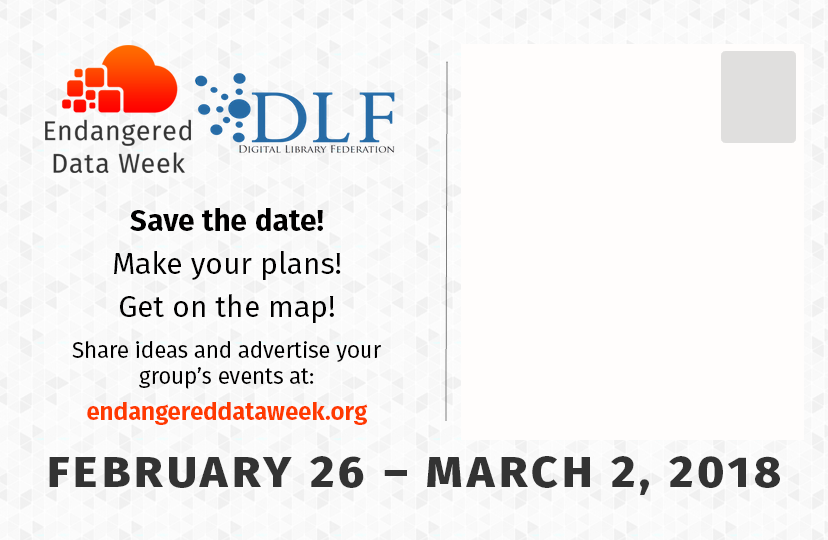
<style>
.page{position:relative;width:828px;height:540px;background:#fffdfc}
.page>*{position:absolute;margin:0}
.t1{font:22px "FiraSans-Regular";color:#010000}
.t2{font:30px "FiraSans-Bold";color:#010000}
.t3{font:30px "FiraSans-Regular";color:#010000}
.t4{font:6px "FiraSans-Regular";color:#010000}
.t5{font:12px "FiraSans-Bold";color:#010000}
.t6{font:12px "FiraSans-Bold";color:#ff3a00}
.t7{font:44px "FiraSans-ExtraBold";letter-spacing:0.09em;color:#333333;scale:1.05 1}
.t8{font:32px "FiraSans-Bold";letter-spacing:0.09em;color:#010000;scale:1.05 1}
</style>
<div class="page">
<p class="t1" style="left:72px;top:208px;width:309px;height:217px;text-align:center"><span class="t2">Save the date!<br> <br></span><span class="t3">Make your plans!<br></span><span class="t4"> <br></span><span class="t3">Get on the map!<br></span><span class="t5"> <br></span>Share ideas and advertise your group’s events at:<br> <br><span class="t6">endangereddataweek.org</span></p>
<p class="t7" style="left:49px;top:456px;width:731px;height:39px"><span class="t8"><br> <br></span>FEBRUARY 26 – MARCH 2, 2018</p>
</div>
